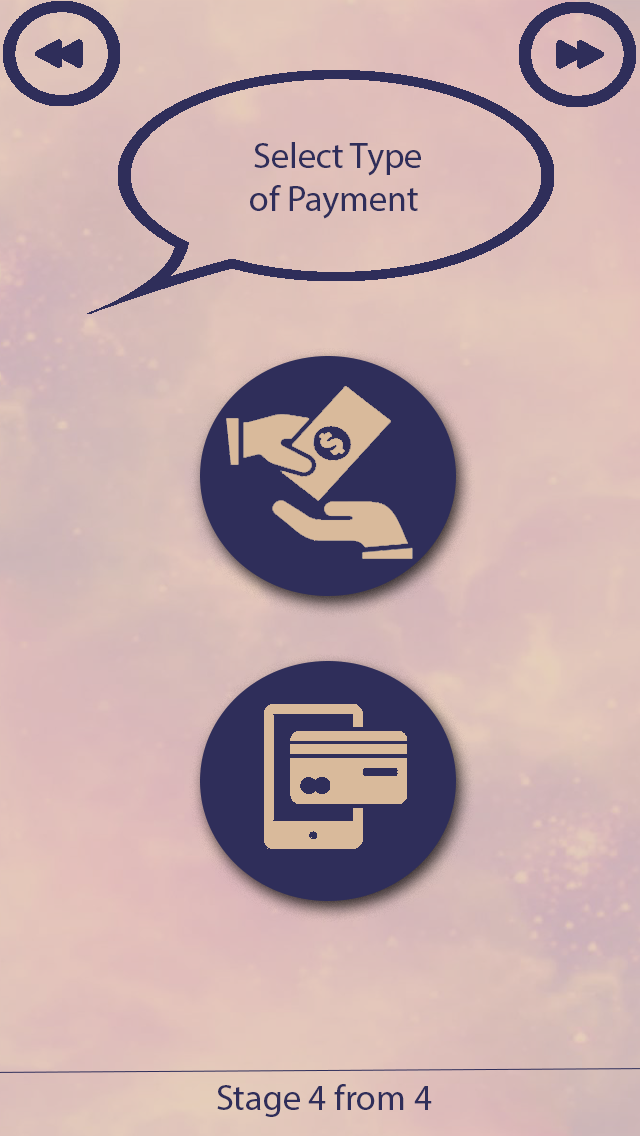
<style>
.page{position:relative;width:640px;height:1136px}
.page>*{position:absolute;margin:0}
.t1{font:36px "MyriadPro-Regular";color:#2f2e5a}
</style>
<div class="page">
<p class="t1" style="left:250px;top:142px;width:171px;height:77px;text-align:center">Select Type <br>of Payment</p>
<p class="t1" style="left:217px;top:1084px;width:215px;height:33px">4 from 4 Stage</p>
</div>
